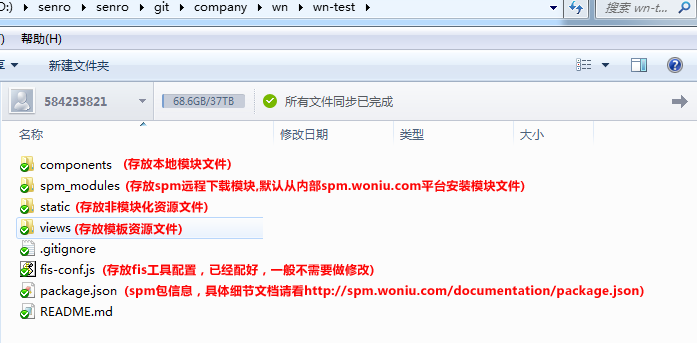
<style>
.page{position:relative;width:697px;height:343px;background:#fcfcfc}
.page>*{position:absolute;margin:0}
.t1{font:12px "MicrosoftYaHei-Bold";letter-spacing:0.03em;color:#fd0505}
</style>
<div class="page">
<p class="t1" style="left:124px;top:158px;width:107px;height:12px">(存放本地模块文件)</p>
<p class="t1" style="left:126px;top:179px;width:399px;height:14px">(存放spm远程下载模块,默认从内部spm.woniu.com平台安装模块文件)</p>
<p class="t1" style="left:76px;top:201px;width:132px;height:12px">(存放非模块化资源文件)</p>
<p class="t1" style="left:75px;top:223px;width:107px;height:12px">(存放模板资源文件)</p>
<p class="t1" style="left:103px;top:264px;width:271px;height:12px">(存放fis工具配置，已经配好，一般不需要做修改)</p>
<p class="t1" style="left:125px;top:285px;width:519px;height:13px">(spm包信息，具体细节文档请看http://spm.woniu.com/documentation/package.json)</p>
</div>
